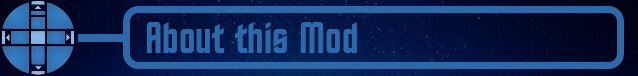
<style>
.page{position:relative;width:638px;height:76px;background:#2d68a9}
.page>*{position:absolute;margin:0}
.t1{font:44px "StarTrekBT-Regular";color:#2d68a9}
</style>
<div class="page">
<p class="t1" style="left:146px;top:22px;width:211px;height:31px">About this Mod</p>
</div>
